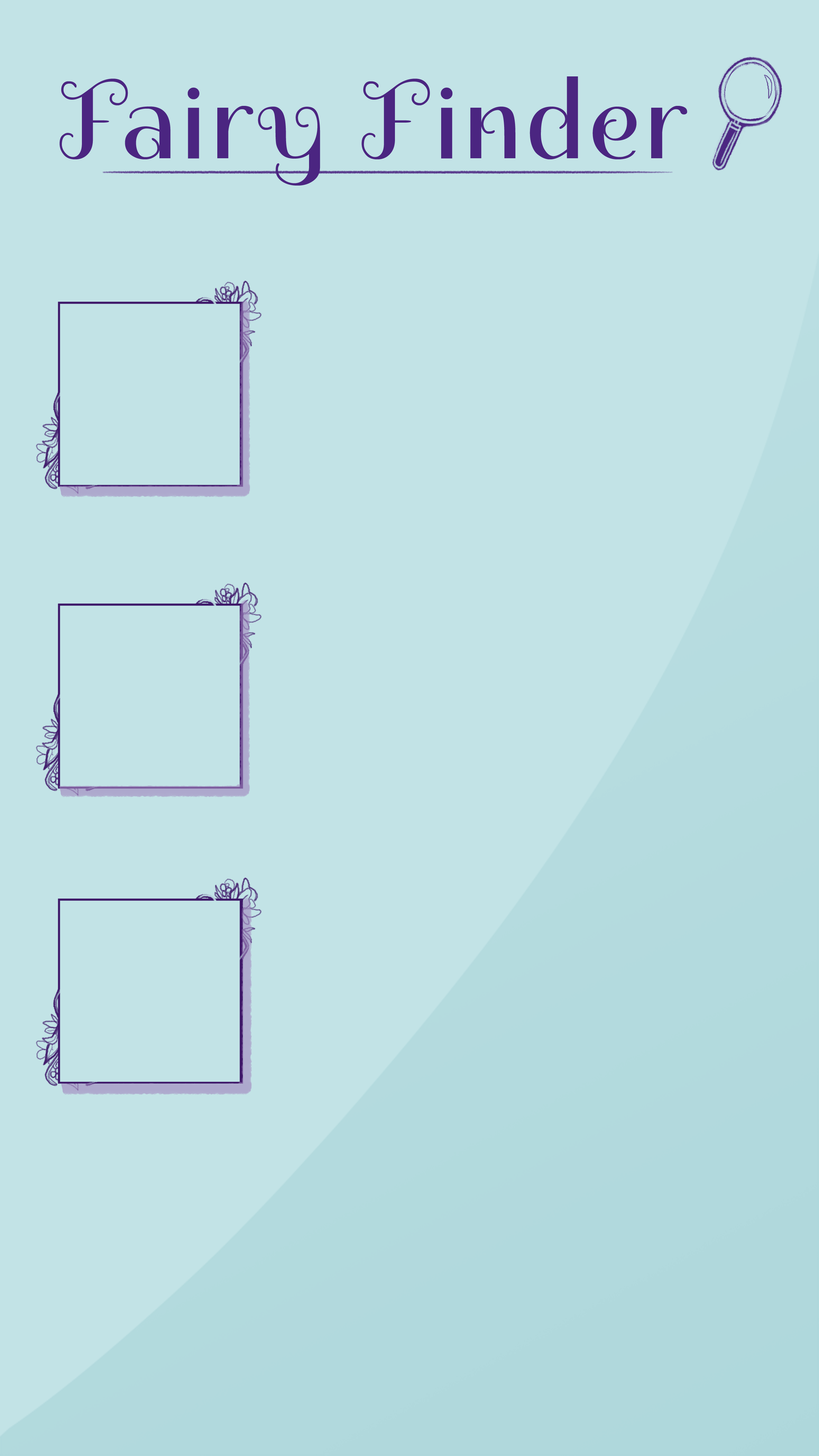
<style>
.page{position:relative;width:819px;height:1456px;background:#c2e3e6}
.page>*{position:absolute;margin:0}
.t1{font:109.2px "Spirax-Regular";letter-spacing:0.04em;color:#4b2581}
</style>
<div class="page">
<p class="t1" style="left:59px;top:76px;width:628px;height:110px">Fairy Finder</p>
</div>
